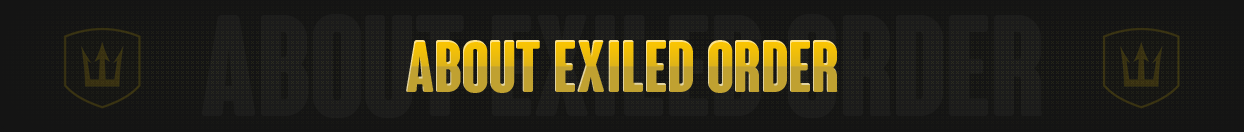
<style>
.page{position:relative;width:1244px;height:132px;background:#141414}
.page>*{position:absolute;margin:0}
.t1{font:72px "ColunaRounded-CondensedBold"}
</style>
<div class="page">
<p class="t1" style="left:406px;top:40px;width:432px;height:53px">about exiled order</p>
</div>
